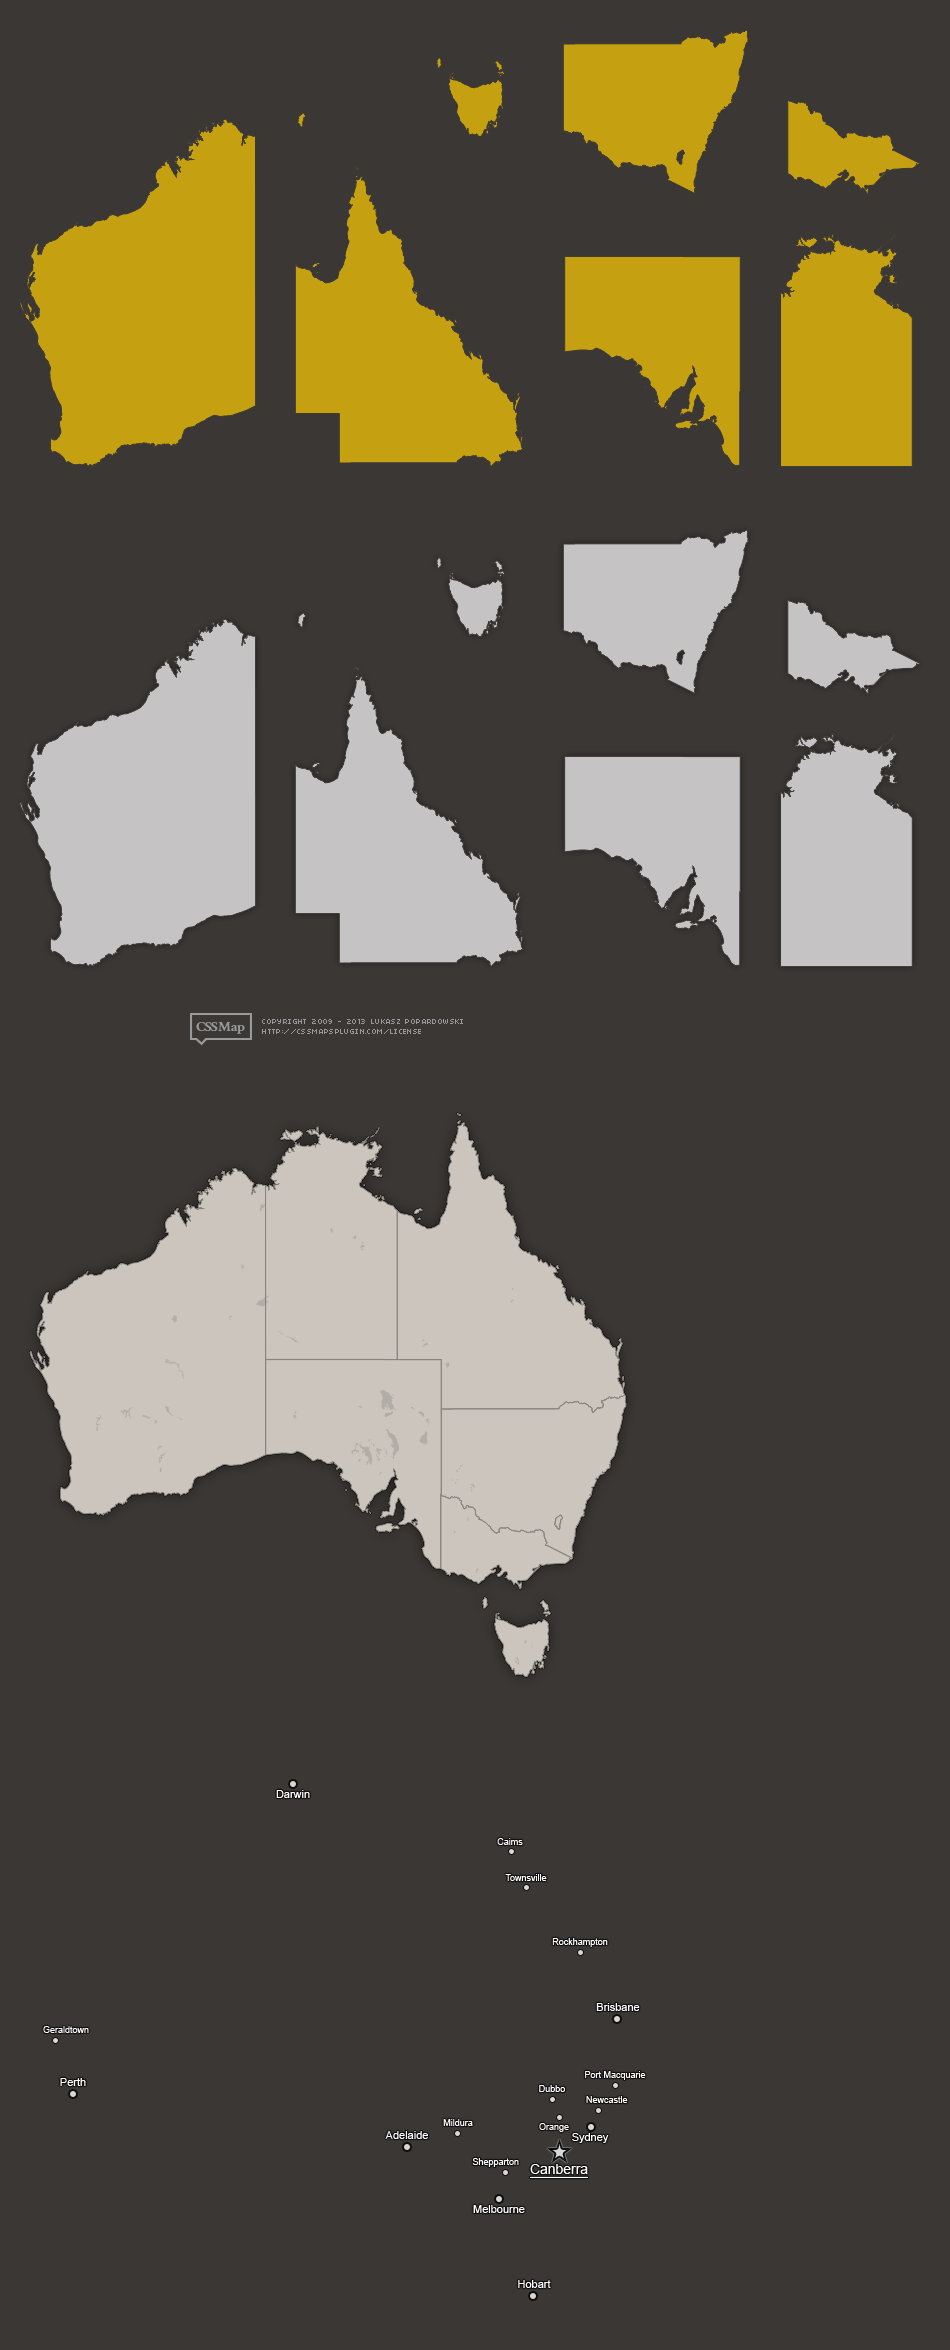
<style>
.page{position:relative;width:950px;height:2350px;background:#3b3735}
.page>*{position:absolute;margin:0}
.t1{font:11px "ArialMT";color:#ffffff}
.t2{font:9px "ArialMT";color:#ffffff}
.t3{font:14.4px "ArialMT";color:#ffffff;text-decoration:underline;scale:0.97 1}
</style>
<div class="page">
<p class="t1" style="left:276px;top:1790px;width:34px;height:8px">Darwin</p>
<p class="t2" style="left:497px;top:1838px;width:26px;height:7px">Caims</p>
<p class="t2" style="left:505px;top:1874px;width:42px;height:7px">Townsville</p>
<p class="t2" style="left:552px;top:1938px;width:56px;height:9px">Rockhampton</p>
<p class="t1" style="left:596px;top:2003px;width:44px;height:8px">Brisbane</p>
<p class="t2" style="left:43px;top:2026px;width:46px;height:7px">Geraldtown</p>
<p class="t1" style="left:60px;top:2078px;width:26px;height:8px">Perth</p>
<p class="t2" style="left:585px;top:2071px;width:61px;height:9px">Port Macquarie</p>
<p class="t2" style="left:539px;top:2085px;width:26px;height:7px">Dubbo</p>
<p class="t2" style="left:586px;top:2096px;width:42px;height:7px">Newcastle</p>
<p class="t2" style="left:443px;top:2119px;width:30px;height:7px">Mildura</p>
<p class="t2" style="left:539px;top:2123px;width:30px;height:9px">Orange</p>
<p class="t1" style="left:385px;top:2131px;width:43px;height:8px">Adelaide</p>
<p class="t1" style="left:572px;top:2133px;width:37px;height:10px">Sydney</p>
<p class="t2" style="left:472px;top:2158px;width:47px;height:9px">Shepparton</p>
<p class="t3" style="left:529px;top:2164px;width:59px;height:14px">Canberra</p>
<p class="t1" style="left:473px;top:2205px;width:52px;height:8px">Melbourne</p>
<p class="t1" style="left:518px;top:2280px;width:33px;height:8px">Hobart</p>
</div>
